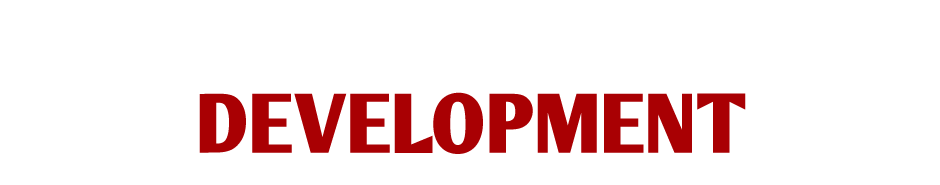
<style>
.page{position:relative;width:940px;height:185px;background:#ffffff}
.page>*{position:absolute;margin:0}
.t1{font:82.7px "ArmWrestler-Bold";color:#a90003}
</style>
<div class="page">
<p class="t1" style="left:199px;top:92px;width:547px;height:62px">DEVELOPMENT</p>
</div>
